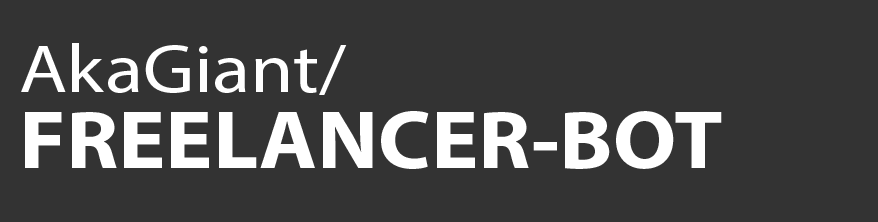
<style>
.page{position:relative;width:878px;height:222px;background:#333333}
.page>*{position:absolute;margin:0}
.t1{font:69px "MyriadPro-Regular";color:#ffffff;scale:1.14 1}
.t2{font:83.5px "MyriadPro-Bold";color:#ffffff;scale:1.06 1}
</style>
<div class="page">
<p class="t1" style="left:21px;top:43px;width:326px;height:52px">AkaGiant/</p>
<p class="t2" style="left:25px;top:111px;width:697px;height:58px">FREELANCER-BOT</p>
</div>
